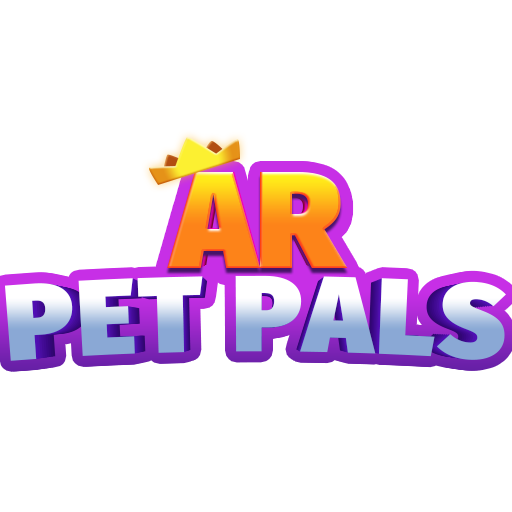
<style>
.page{position:relative;width:512px;height:512px;background:#ffffff}
.page>*{position:absolute;margin:0}
.t1{font:138.2px "FiraSans-Ultra"}
.t2{font:135.4px "FiraSans-Ultra"}
.t3{font:132.7px "FiraSans-Ultra"}
.t4{font:130.1px "FiraSans-Ultra"}
.t5{font:127.5px "FiraSans-Ultra"}
.t6{font:124.9px "FiraSans-Ultra"}
.t7{font:110.6px "FiraSans-Ultra";letter-spacing:0.025em}
.t8{font:109.5px "FiraSans-Ultra";letter-spacing:0.025em}
.t9{font:108.4px "FiraSans-Ultra";letter-spacing:0.025em}
.t10{font:107.3px "FiraSans-Ultra";letter-spacing:0.025em}
.t11{font:106.2px "FiraSans-Ultra";letter-spacing:0.025em}
.t12{font:105.1px "FiraSans-Ultra";letter-spacing:0.025em}
.t13{font:104.1px "FiraSans-Ultra";letter-spacing:0.025em}
</style>
<div class="page">
<p class="t1" style="left:167px;top:172px;width:181px;height:96px">AR</p>
<p class="t2" style="left:170px;top:172px;width:176px;height:95px">AR</p>
<p class="t3" style="left:171px;top:174px;width:173px;height:93px">AR</p>
<p class="t4" style="left:172px;top:174px;width:170px;height:92px">AR</p>
<p class="t5" style="left:174px;top:177px;width:167px;height:89px">AR</p>
<p class="t6" style="left:176px;top:178px;width:163px;height:87px">AR</p>
<p class="t7" style="left:4px;top:275px;width:502px;height:86px">PET PALS</p>
<p class="t8" style="left:7px;top:276px;width:497px;height:85px">PET PALS</p>
<p class="t9" style="left:10px;top:276px;width:491px;height:85px">PET PALS</p>
<p class="t10" style="left:12px;top:277px;width:487px;height:83px">PET PALS</p>
<p class="t11" style="left:14px;top:277px;width:483px;height:83px">PET PALS</p>
<p class="t12" style="left:17px;top:278px;width:477px;height:82px">PET PALS</p>
<p class="t13" style="left:19px;top:278px;width:473px;height:81px">PET PALS</p>
</div>
